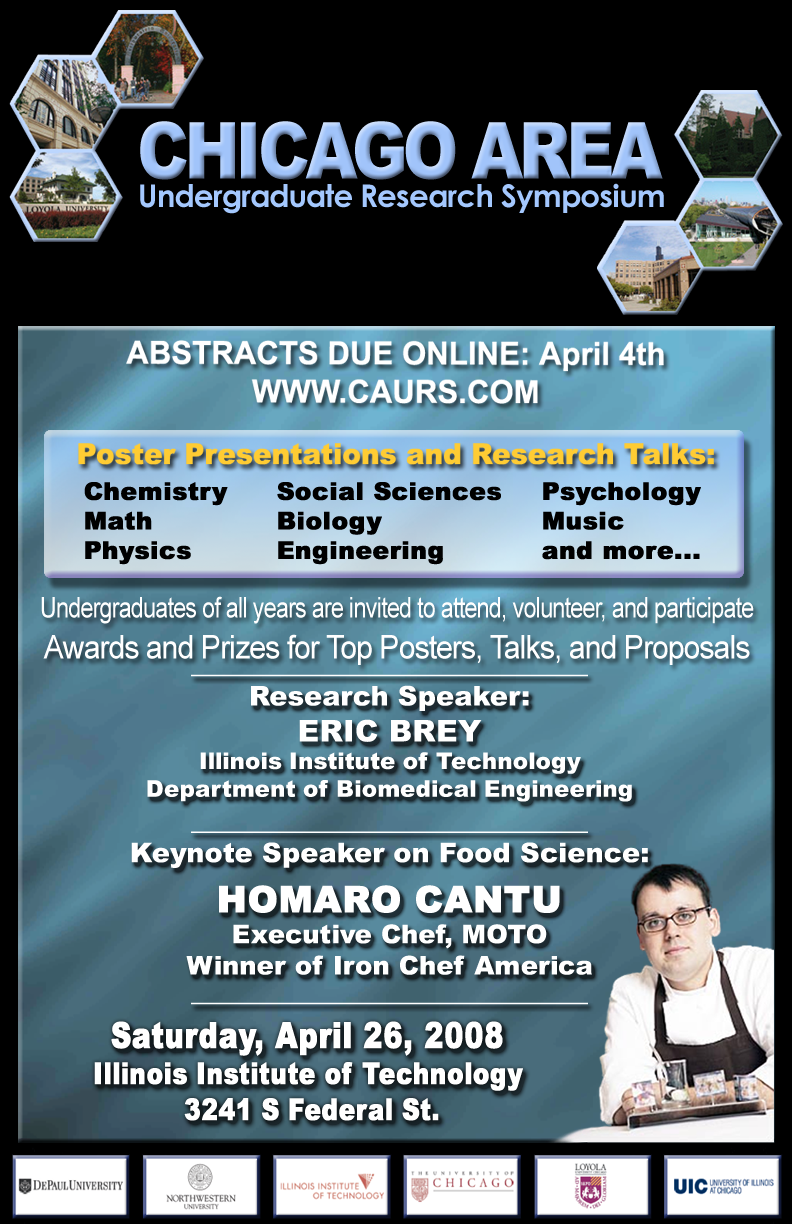
<style>
.page{position:relative;width:792px;height:1224px;background:#000000}
.page>*{position:absolute;margin:0}
.t1{font:78.6px "Arial-Black";letter-spacing:-0.06em;color:#a1c4fa;scale:0.85 1}
.t2{font:31.3px "CenturyGothic-Bold";letter-spacing:-0.03em;color:#a4c8fe}
.t3{font:24.6px "Arial-Black";color:#000000;font-weight:bold}
.t4{font:28.6px "ArialMT";letter-spacing:-0.03em;color:#ffffff;scale:0.82 1}
.t5{font:32.8px "ArialMT";letter-spacing:-0.03em;color:#ffffff;scale:0.93 1}
.t6{font:23px "Arial-Black";color:#ffffff}
.t7{font:27.3px "Arial-Black";color:#ffffff}
.t8{font:30px "Arial-Black";color:#ffffff}
.t9{font:36px "Arial-Black";color:#ffffff;font-weight:bold}
.t10{font:26px "Arial-Black";color:#ffffff}
.t11{font:30px "Arial-Black";color:#ffffff;font-weight:bold;scale:0.81 1}
.t12{font:35.2px "Arial-Black";color:#ffffff;font-weight:bold;scale:0.81 1}
</style>
<div class="page">
<p class="t1" style="left:140px;top:121px;width:523px;height:59px">CHICAGO AREA</p>
<p class="t2" style="left:140px;top:183px;width:524px;height:31px">Undergraduate Research Symposium</p>
<p class="t3" style="left:84px;top:482px;width:144px;height:83px">Chemistry<br>Math<br>Physics</p>
<p class="t3" style="left:277px;top:482px;width:224px;height:83px">Social Sciences<br>Biology<br>Engineering</p>
<p class="t3" style="left:542px;top:482px;width:159px;height:78px">Psychology<br>Music<br>and more...</p>
<p class="t4" style="left:41px;top:596px;width:713px;height:28px">Undergraduates of all years are invited to attend, volunteer, and participate</p>
<p class="t5" style="left:43px;top:634px;width:707px;height:31px">Awards and Prizes for Top Posters, Talks, and Proposals</p>
<p class="t6" style="left:131px;top:674px;width:517px;height:331px;text-align:center"><span class="t7">_____________________________<br>Research Speaker:<br></span><span class="t8">ERIC BREY<br></span>Illinois Institute of Technology<br>Department of Biomedical Engineering<br><span class="t7">_____________________________<br>Keynote Speaker on Food Science:<br></span><span class="t9">HOMARO CANTU<br></span><span class="t10">Executive Chef, MOTO<br>Winner of Iron Chef America <br></span><span class="t7">_____________________________</span></p>
<p class="t11" style="left:94px;top:1021px;width:429px;height:100px;text-align:center"><span class="t12">Saturday, April 26, 2008<br></span>Illinois Institute of Technology<br> 3241 S Federal St.</p>
</div>
